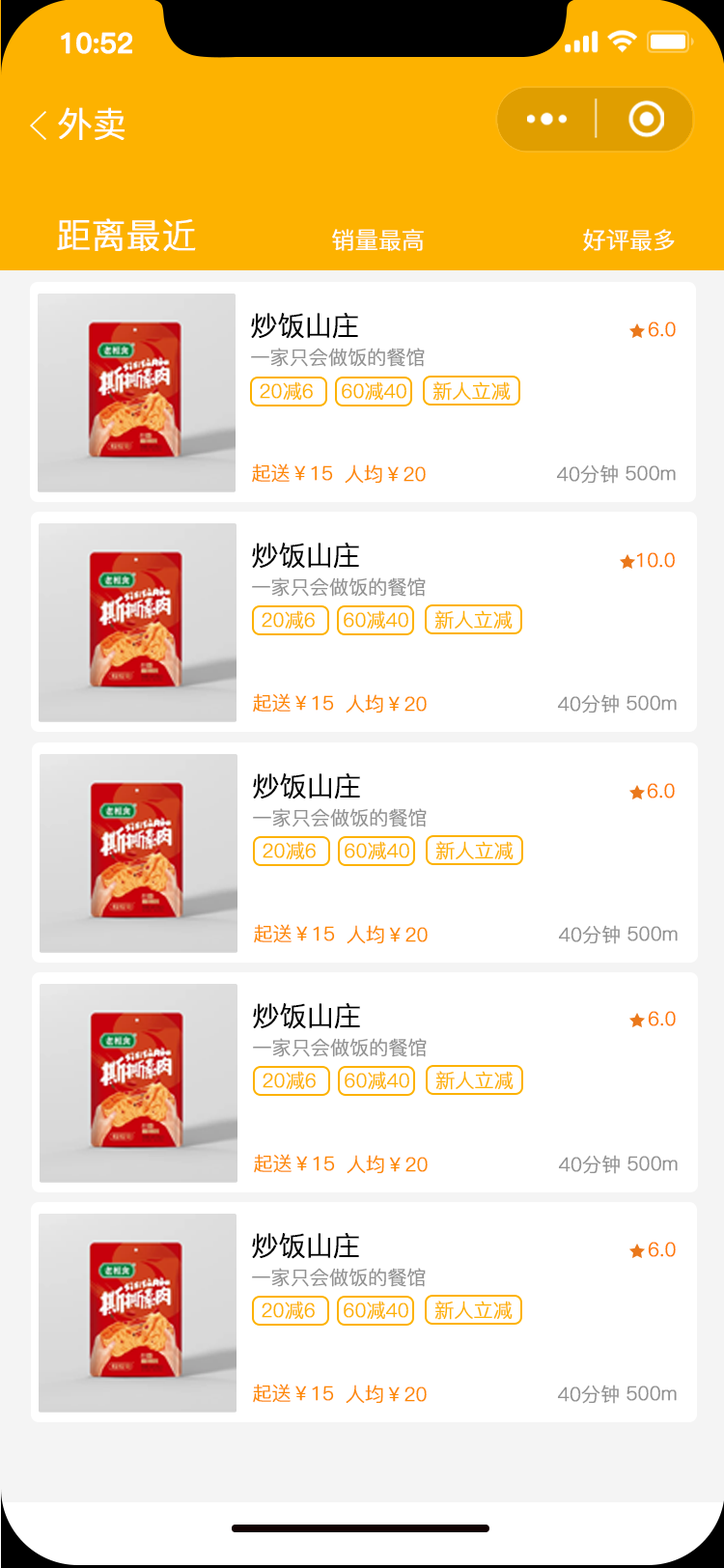
<style>
.page{position:relative;width:724px;height:1568px;background:#ffffff}
.page>*{position:absolute;margin:0}
.t1{font:27.5px "PingFang-SC-Bold";letter-spacing:-0.02em;color:#ffffff;font-weight:bold}
.t2{font:34.8px "PingFang-SC-Regular";letter-spacing:-0.02em;color:#ffffff;font-weight:bold}
.t3{font:23.2px "PingFang-SC-Regular";letter-spacing:-0.02em;color:#ffffff;font-weight:bold}
.t4{font:27px "PingFang-SC-Regular";letter-spacing:-0.02em;color:#000000;font-weight:bold}
.t5{font:19.3px "PingFang-SC-Regular";letter-spacing:-0.02em;color:#ff7900;font-weight:bold}
.t6{font:19.3px "PingFang-SC-Regular";letter-spacing:-0.02em;color:#919191;font-weight:bold}
.t7{font:19.3px "PingFang-SC-Regular";letter-spacing:-0.02em;color:#fdb200;font-weight:bold}
.t8{font:19.3px "PingFang-SC-Regular";letter-spacing:-0.02em;color:#fd8900;font-weight:bold}
</style>
<div class="page">
<p class="t1" style="left:61px;top:32px;width:71px;height:22px">10:52</p>
<p class="t2" style="left:58px;top:107px;width:67px;height:33px">外卖</p>
<p class="t2" style="left:57px;top:218px;width:139px;height:33px">距离最近</p>
<p class="t3" style="left:332px;top:229px;width:92px;height:22px">销量最高</p>
<p class="t3" style="left:583px;top:229px;width:92px;height:22px">好评最多</p>
<p class="t4" style="left:251px;top:313px;width:107px;height:26px">炒饭山庄</p>
<p class="t5" style="left:648px;top:322px;width:28px;height:15px">6.0</p>
<p class="t6" style="left:251px;top:348px;width:174px;height:19px">一家只会做饭的餐馆</p>
<p class="t7" style="left:260px;top:381px;width:53px;height:20px">20减6</p>
<p class="t7" style="left:342px;top:381px;width:64px;height:20px">60减40</p>
<p class="t7" style="left:433px;top:381px;width:78px;height:20px">新人立减</p>
<p class="t8" style="left:252px;top:463px;width:81px;height:20px">起送￥15</p>
<p class="t8" style="left:345px;top:464px;width:81px;height:20px">人均￥20</p>
<p class="t6" style="left:556px;top:464px;width:62px;height:20px">40分钟</p>
<p class="t6" style="left:626px;top:465px;width:50px;height:16px">500m</p>
<p class="t4" style="left:252px;top:543px;width:107px;height:26px">炒饭山庄</p>
<p class="t5" style="left:636px;top:552px;width:39px;height:16px">10.0</p>
<p class="t6" style="left:252px;top:577px;width:174px;height:20px">一家只会做饭的餐馆</p>
<p class="t7" style="left:262px;top:610px;width:53px;height:20px">20减6</p>
<p class="t7" style="left:344px;top:610px;width:64px;height:20px">60减40</p>
<p class="t7" style="left:434px;top:610px;width:79px;height:20px">新人立减</p>
<p class="t8" style="left:253px;top:693px;width:81px;height:20px">起送￥15</p>
<p class="t8" style="left:346px;top:694px;width:81px;height:20px">人均￥20</p>
<p class="t6" style="left:557px;top:694px;width:62px;height:20px">40分钟</p>
<p class="t6" style="left:627px;top:695px;width:50px;height:16px">500m</p>
<p class="t4" style="left:253px;top:773px;width:107px;height:26px">炒饭山庄</p>
<p class="t5" style="left:647px;top:783px;width:28px;height:15px">6.0</p>
<p class="t6" style="left:253px;top:808px;width:174px;height:19px">一家只会做饭的餐馆</p>
<p class="t7" style="left:263px;top:841px;width:53px;height:19px">20减6</p>
<p class="t7" style="left:345px;top:841px;width:64px;height:19px">60减40</p>
<p class="t7" style="left:435px;top:841px;width:79px;height:19px">新人立减</p>
<p class="t8" style="left:254px;top:924px;width:81px;height:19px">起送￥15</p>
<p class="t8" style="left:347px;top:925px;width:81px;height:19px">人均￥20</p>
<p class="t6" style="left:558px;top:925px;width:62px;height:19px">40分钟</p>
<p class="t6" style="left:628px;top:926px;width:50px;height:15px">500m</p>
<p class="t4" style="left:253px;top:1003px;width:107px;height:26px">炒饭山庄</p>
<p class="t5" style="left:648px;top:1011px;width:28px;height:15px">6.0</p>
<p class="t6" style="left:253px;top:1038px;width:174px;height:19px">一家只会做饭的餐馆</p>
<p class="t7" style="left:263px;top:1071px;width:53px;height:19px">20减6</p>
<p class="t7" style="left:345px;top:1071px;width:64px;height:19px">60减40</p>
<p class="t7" style="left:435px;top:1071px;width:79px;height:19px">新人立减</p>
<p class="t8" style="left:254px;top:1154px;width:81px;height:19px">起送￥15</p>
<p class="t8" style="left:347px;top:1155px;width:81px;height:19px">人均￥20</p>
<p class="t6" style="left:558px;top:1155px;width:62px;height:19px">40分钟</p>
<p class="t6" style="left:628px;top:1156px;width:50px;height:15px">500m</p>
<p class="t4" style="left:252px;top:1233px;width:107px;height:26px">炒饭山庄</p>
<p class="t5" style="left:648px;top:1242px;width:28px;height:15px">6.0</p>
<p class="t6" style="left:252px;top:1268px;width:174px;height:19px">一家只会做饭的餐馆</p>
<p class="t7" style="left:262px;top:1301px;width:53px;height:19px">20减6</p>
<p class="t7" style="left:344px;top:1301px;width:64px;height:19px">60减40</p>
<p class="t7" style="left:434px;top:1301px;width:79px;height:19px">新人立减</p>
<p class="t8" style="left:253px;top:1384px;width:81px;height:19px">起送￥15</p>
<p class="t8" style="left:346px;top:1385px;width:81px;height:19px">人均￥20</p>
<p class="t6" style="left:557px;top:1385px;width:62px;height:19px">40分钟</p>
<p class="t6" style="left:627px;top:1386px;width:50px;height:15px">500m</p>
</div>
